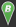
<style>
.page{position:relative;width:16px;height:27px;background:#333333}
.page>*{position:absolute;margin:0}
.t1{font:10px "SegoeUI-BoldItalic";color:#f3f3f3;font-weight:bold}
</style>
<div class="page">
<p class="t1" style="left:4px;top:5px;width:7px;height:8px">B</p>
</div>
